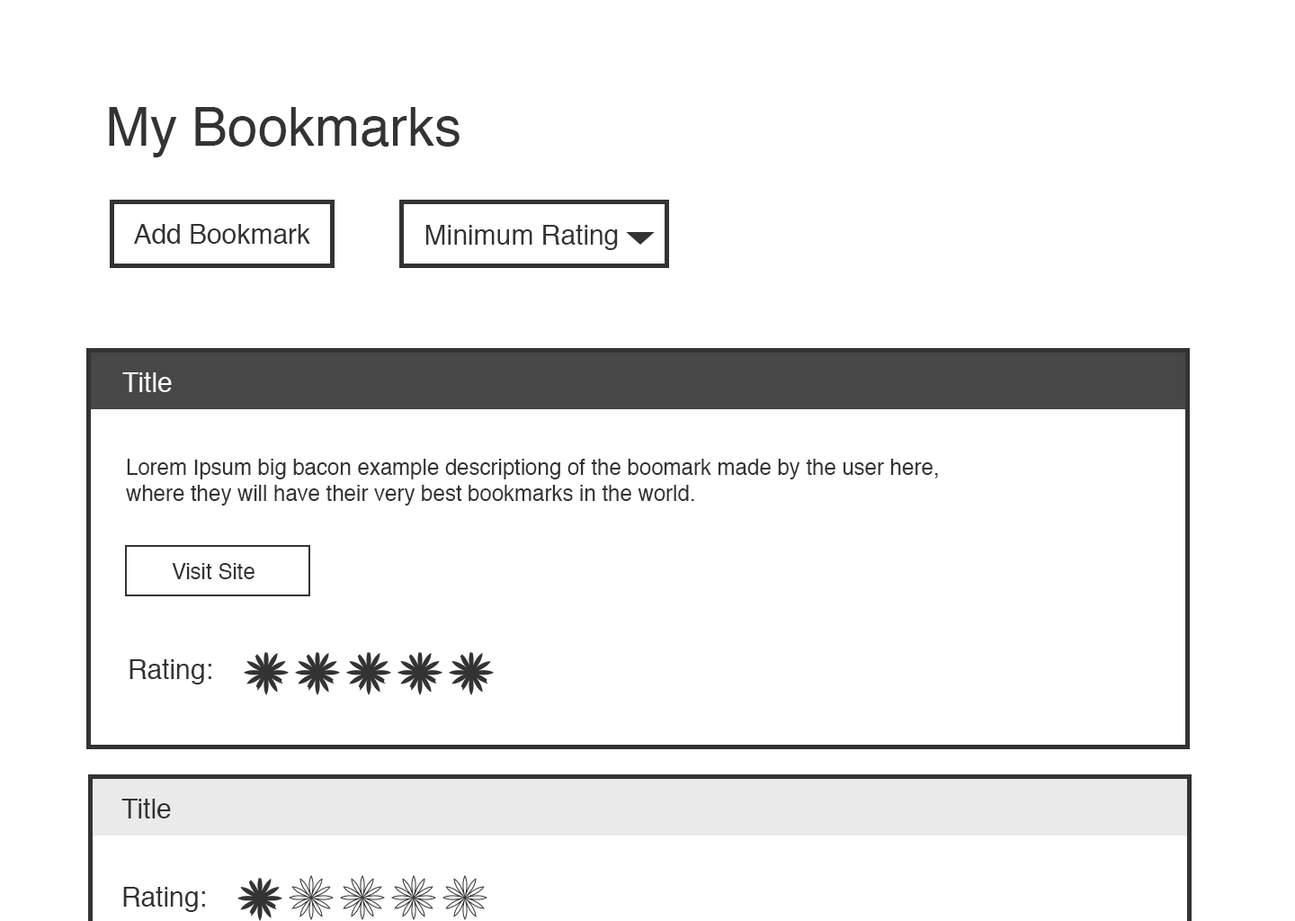
<style>
.page{position:relative;width:1295px;height:921px;background:#ffffff}
.page>*{position:absolute;margin:0}
.t1{font:54px "Helvetica";color:#333333}
.t2{font:27px "Helvetica";color:#333333}
.t3{font:27px "Helvetica";color:#ffffff}
.t4{font:21.6px "Helvetica";color:#333333}
</style>
<div class="page">
<p class="t1" style="left:109px;top:107px;width:351px;height:50px">My Bookmarks</p>
<p class="t2" style="left:134px;top:224px;width:176px;height:20px">Add Bookmark</p>
<p class="t2" style="left:425px;top:225px;width:193px;height:25px">Minimum Rating</p>
<p class="t3" style="left:122px;top:372px;width:50px;height:20px">Title</p>
<p class="t4" style="left:126px;top:459px;width:812px;height:46px">Lorem Ipsum big bacon example descriptiong of the boomark made by the user here,<br>where they will have their very best bookmarks in the world.</p>
<p class="t4" style="left:172px;top:563px;width:82px;height:16px">Visit Site</p>
<p class="t2" style="left:129px;top:659px;width:82px;height:25px">Rating:</p>
<p class="t2" style="left:121px;top:799px;width:50px;height:19px">Title</p>
<p class="t2" style="left:123px;top:887px;width:82px;height:25px">Rating:</p>
</div>
